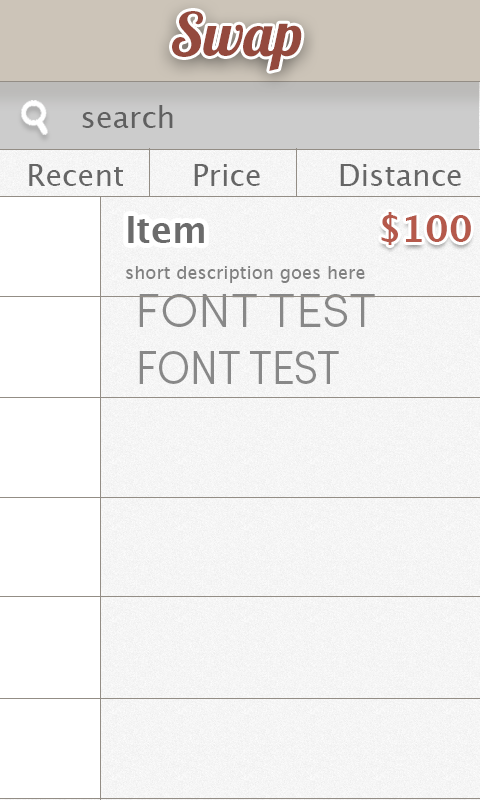
<style>
.page{position:relative;width:480px;height:800px}
.page>*{position:absolute;margin:0}
.t1{font:60px "Lobster1.4";color:#94493d}
.t2{font:30px "LucidaGrande";color:#606060}
.t3{font:30px "LucidaGrande";color:#666666}
.t4{font:36px "LucidaGrande-Bold";color:#6b6b6b}
.t5{font:36px "LucidaGrande-Bold";color:#b5594b}
.t6{font:18px "LucidaGrande";color:#808080}
.t7{font:48px "SofiaProLight";color:#888888}
.t8{font:48px "SofiaProLightCondensed";color:#888888}
</style>
<div class="page">
<p class="t1" style="left:172px;top:11px;width:130px;height:60px">Swap</p>
<p class="t2" style="left:82px;top:105px;width:91px;height:23px">search</p>
<p class="t3" style="left:29px;top:164px;width:94px;height:22px">Recent</p>
<p class="t3" style="left:194px;top:164px;width:66px;height:22px">Price</p>
<p class="t3" style="left:340px;top:164px;width:121px;height:22px">Distance</p>
<p class="t4" style="left:128px;top:216px;width:76px;height:27px">Item</p>
<p class="t5" style="left:381px;top:212px;width:90px;height:33px">$100</p>
<p class="t6" style="left:126px;top:266px;width:239px;height:17px">short description goes here</p>
<p class="t7" style="left:139px;top:294px;width:236px;height:33px">FONT TEST</p>
<p class="t8" style="left:139px;top:351px;width:200px;height:33px">FONT TEST</p>
</div>
